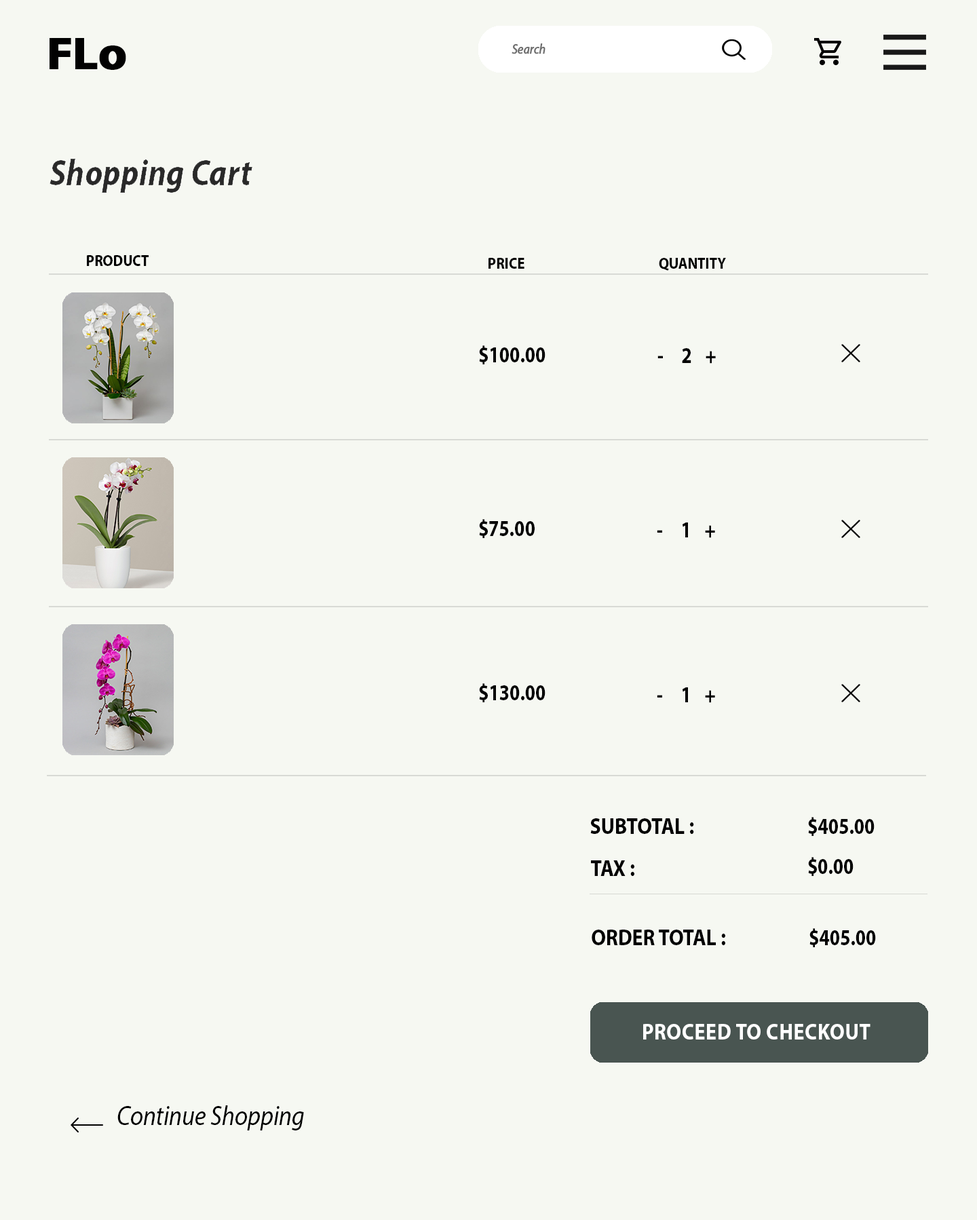
<style>
.page{position:relative;width:977px;height:1220px;background:#f6f8f2}
.page>*{position:absolute;margin:0}
.t1{font:45.6px "MyriadPro-Bold";color:#020202;font-weight:bold;scale:1.08 1}
.t2{font:13.7px "MyriadPro-It";color:#6f6f6f;font-weight:bold;scale:0.89 1}
.t3{font:16px "MyriadPro-Bold";color:#000000;text-transform:uppercase;scale:0.89 1}
.t4{font:22.8px "MyriadPro-Bold";color:#020202;scale:0.82 1}
.t5{font:22.8px "MyriadPro-Bold";color:#000000;text-transform:uppercase;scale:0.89 1}
.t6{font:22.8px "MyriadPro-Bold";letter-spacing:0.025em;color:#ffffff;text-transform:uppercase;scale:0.89 1}
.t7{font:27.4px "MyriadPro-It";color:#000000;scale:0.89 1}
</style>
<div class="page">
<p class="t1" style="left:50px;top:38px;width:76px;height:32px">FLo</p>
<p class="t2" style="left:512px;top:43px;width:34px;height:11px">Search</p>
<p class="t3" style="left:87px;top:255px;width:62px;height:11px">Product</p>
<p class="t3" style="left:489px;top:258px;width:237px;height:13px">Price      Quantity</p>
<p class="t4" style="left:479px;top:345px;width:67px;height:19px">$100.00</p>
<p class="t4" style="left:658px;top:348px;width:58px;height:16px">- 2 +</p>
<p class="t4" style="left:479px;top:519px;width:56px;height:19px">$75.00</p>
<p class="t4" style="left:657px;top:523px;width:58px;height:15px">- 1 +</p>
<p class="t4" style="left:479px;top:683px;width:67px;height:19px">$130.00</p>
<p class="t4" style="left:657px;top:687px;width:58px;height:16px">- 1 +</p>
<p class="t5" style="left:590px;top:818px;width:104px;height:16px">Subtotal :</p>
<p class="t4" style="left:808px;top:817px;width:67px;height:19px">$405.00</p>
<p class="t4" style="left:808px;top:857px;width:46px;height:19px">$0.00</p>
<p class="t5" style="left:591px;top:861px;width:44px;height:15px">Tax :</p>
<p class="t5" style="left:592px;top:930px;width:133px;height:15px">Order Total :</p>
<p class="t4" style="left:810px;top:928px;width:66px;height:19px">$405.00</p>
<p class="t6" style="left:643px;top:1024px;width:228px;height:16px">Proceed to Checkout</p>
<p class="t7" style="left:117px;top:1106px;width:187px;height:25px">Continue Shopping</p>
</div>
